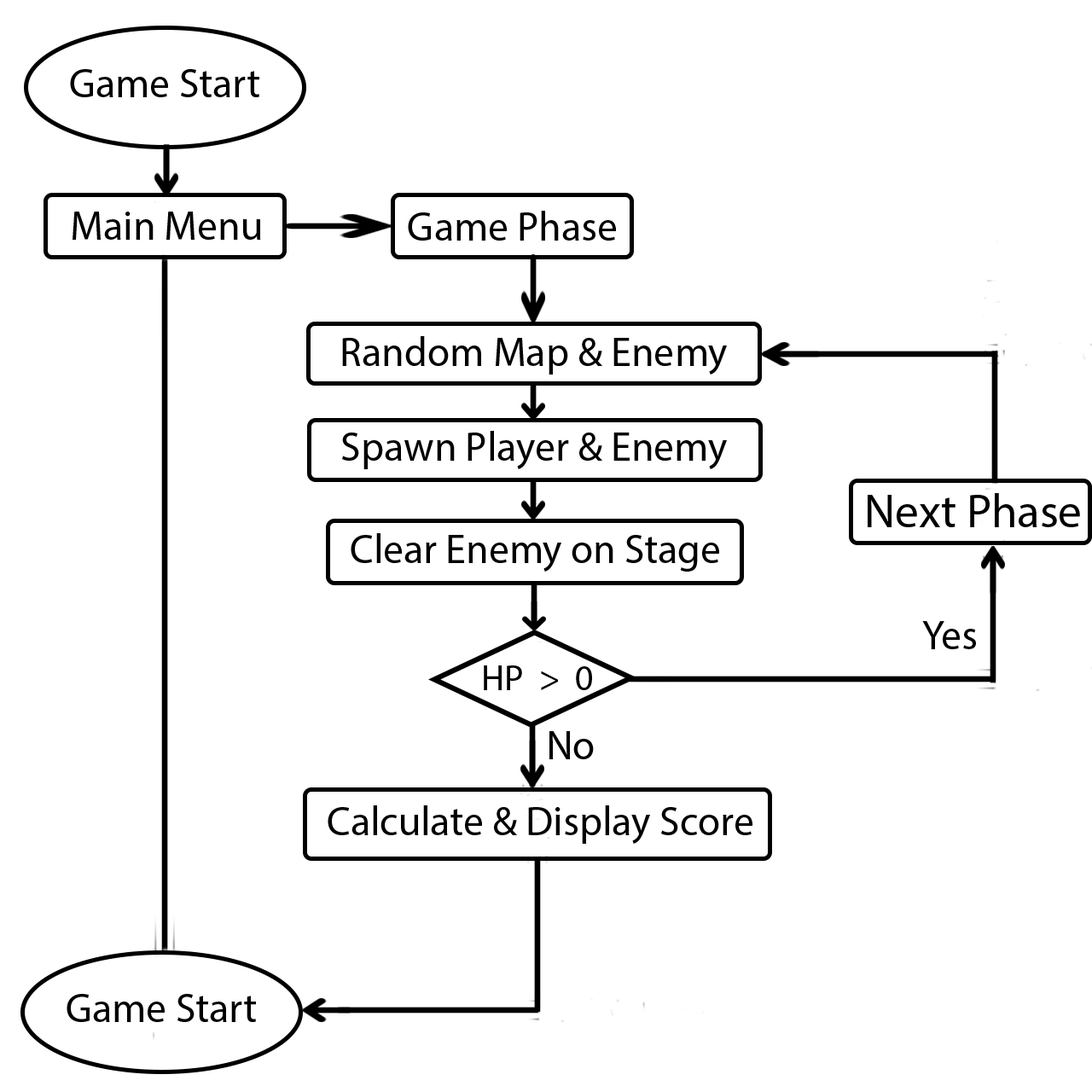
<style>
.page{position:relative;width:1092px;height:1092px;background:#ffffff}
.page>*{position:absolute;margin:0}
.t1{font:40.9px "MyriadPro-Regular";color:#000000}
.t2{font:46.9px "MyriadPro-Regular";color:#000000}
.t3{font:35.8px "MyriadPro-Regular";color:#000000}
</style>
<div class="page">
<p class="t1" style="left:70px;top:69px;width:189px;height:28px">Game Start</p>
<p class="t1" style="left:73px;top:212px;width:188px;height:28px">Main Menu</p>
<p class="t1" style="left:408px;top:211px;width:208px;height:30px">Game Phase</p>
<p class="t1" style="left:342px;top:336px;width:385px;height:39px">Random Map &amp; Enemy</p>
<p class="t1" style="left:342px;top:431px;width:385px;height:38px">Spawn Player &amp; Enemy</p>
<p class="t2" style="left:868px;top:493px;width:212px;height:34px">Next Phase</p>
<p class="t1" style="left:351px;top:533px;width:368px;height:39px">Clear Enemy on Stage</p>
<p class="t1" style="left:922px;top:621px;width:54px;height:28px">Yes</p>
<p class="t3" style="left:484px;top:665px;width:108px;height:25px">HP  &gt;  0</p>
<p class="t1" style="left:549px;top:731px;width:45px;height:28px">No</p>
<p class="t1" style="left:328px;top:805px;width:424px;height:39px">Calculate &amp; Display Score</p>
<p class="t1" style="left:67px;top:994px;width:189px;height:28px">Game Start</p>
</div>
